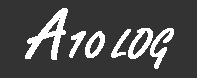
<style>
.page{position:relative;width:197px;height:78px;background:#333333}
.page>*{position:absolute;margin:0}
.t1{font:45px "FreestyleScript-Regular";color:#ffffff;font-weight:bold}
.t2{font:75px "FreestyleScript-Regular";color:#ffffff;font-weight:bold}
.t3{font:52.5px "FreestyleScript-Regular";color:#ffffff;font-weight:bold}
</style>
<div class="page">
<p class="t1" style="left:25px;top:8px;width:149px;height:61px"><span class="t2">A</span><span class="t3">10 </span>LOG</p>
</div>
